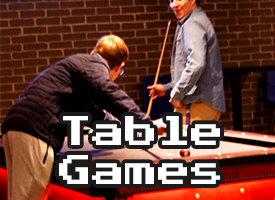
<style>
.page{position:relative;width:275px;height:200px}
.page>*{position:absolute;margin:0}
.t1{font:32.9px "PressStart2P";color:#ffffff}
</style>
<div class="page">
<p class="t1" style="left:59px;top:116px;width:161px;height:68px;text-align:center">Table<br>Games</p>
</div>
